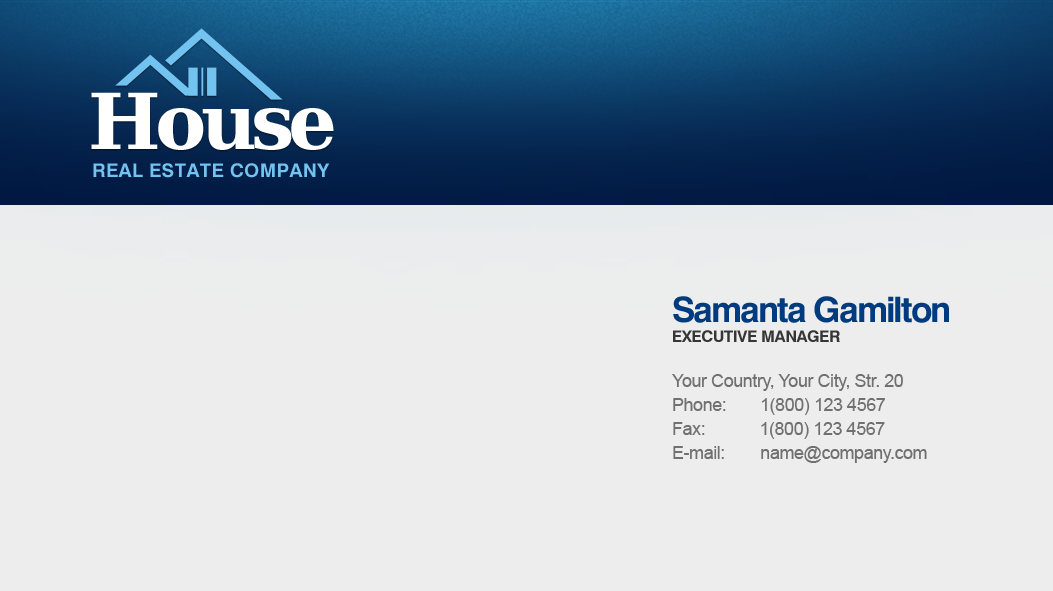
<style>
.page{position:relative;width:1053px;height:591px;background:#ededed}
.page>*{position:absolute;margin:0}
.t1{font:76.9px "BitstreamVeraSerif-Bold";letter-spacing:-0.075em;color:#ffffff}
.t2{font:18.8px "Swiss721BT-Bold";letter-spacing:0.025em;color:#73c3f1;text-transform:uppercase}
.t3{font:16px/20.1px "Swiss721BT-Bold";letter-spacing:-0.025em;color:#363636;text-transform:uppercase}
.t4{font:35.1px/20.1px "Swiss721BT-Bold";letter-spacing:-0.05em;color:#003b7f}
.t5{font:18px/24px "ArialMT";letter-spacing:-0.025em;color:#707070}
</style>
<div class="page">
<p class="t1" style="left:91px;top:92px;width:243px;height:58px">House</p>
<p class="t2" style="left:93px;top:163px;width:237px;height:15px">Real Estate Company</p>
<p class="t3" style="left:673px;top:296px;width:276px;height:46px"><span class="t4">Samanta Gamilton<br></span>Executive Manager</p>
<p class="t5" style="left:672px;top:374px;width:255px;height:89px">Your Country, Your City, Str. 20<br>Phone:       1(800) 123 4567<br>Fax:            1(800) 123 4567<br>E-mail:        name@company.com</p>
</div>
